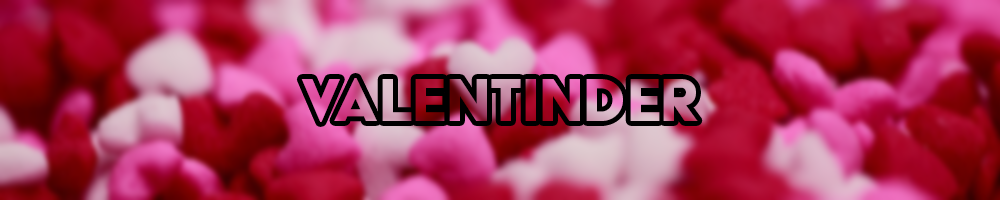
<style>
.page{position:relative;width:1000px;height:200px}
.page>*{position:absolute;margin:0}
.t1{font:70px "AcierBATText-Solid"}
</style>
<div class="page">
<p class="t1" style="left:301px;top:78px;width:397px;height:44px">Valentinder</p>
</div>
